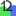
<style>
.page{position:relative;width:16px;height:16px;background:#4ee455}
.page>*{position:absolute;margin:0}
.t1{font:15px "LithosPro-Regular"}
</style>
<div class="page">
<p class="t1" style="left:0px;top:0px;width:6px;height:11px">1</p>
<p class="t1" style="left:4px;top:0px;width:9px;height:11px">2</p>
</div>
